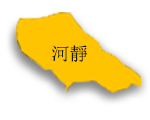
<style>
.page{position:relative;width:150px;height:120px;background:#ffffff}
.page>*{position:absolute;margin:0}
.t1{font:18px "SimSun";color:#181818}
</style>
<div class="page">
<p class="t1" style="left:52px;top:45px;width:36px;height:17px">河靜</p>
</div>
